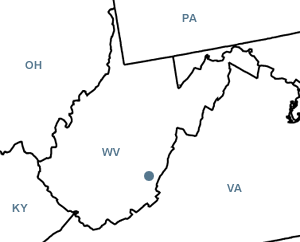
<style>
.page{position:relative;width:300px;height:242px;background:#ffffff}
.page>*{position:absolute;margin:0}
.t1{font:10.9px "Arial-BoldMT";letter-spacing:0.05em;color:#55778e}
</style>
<div class="page">
<p class="t1" style="left:182px;top:14px;width:15px;height:8px">PA</p>
<p class="t1" style="left:25px;top:61px;width:17px;height:8px">OH</p>
<p class="t1" style="left:102px;top:148px;width:18px;height:8px">WV</p>
<p class="t1" style="left:227px;top:184px;width:15px;height:8px">VA</p>
<p class="t1" style="left:12px;top:204px;width:16px;height:8px">KY</p>
</div>
